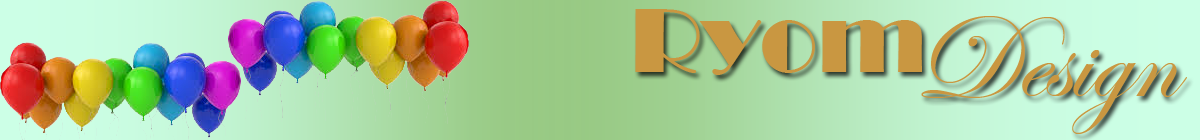
<style>
.page{position:relative;width:1200px;height:140px}
.page>*{position:absolute;margin:0}
.t1{font:95px "Broadway";color:#c99741}
.t2{font:120px "EdwardianScriptITC";color:#c99741}
</style>
<div class="page">
<p class="t1" style="left:635px;top:9px;width:287px;height:66px">Ryom</p>
<p class="t2" style="left:921px;top:16px;width:266px;height:118px">Design</p>
</div>
